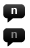
<style>
.page{position:relative;width:30px;height:48px;background:#ffffff}
.page>*{position:absolute;margin:0}
.t1{font:23.2px "font3933";letter-spacing:0.01em}
.t2{font:11.2px "HelveticaNeue-Bold";letter-spacing:0.01em;color:#ffffff}
.t3{font:23.2px "font3933";letter-spacing:0.01em;color:#000000}
.t4{font:11.2px "HelveticaNeue-Bold";letter-spacing:0.01em;color:#7f7f7f}
</style>
<div class="page">
<p class="t1" style="left:3px;top:4px;width:22px;height:19px">C</p>
<p class="t2" style="left:11px;top:8px;width:6px;height:6px">n</p>
<p class="t3" style="left:3px;top:28px;width:22px;height:19px">C</p>
<p class="t4" style="left:11px;top:32px;width:6px;height:6px">n</p>
</div>
